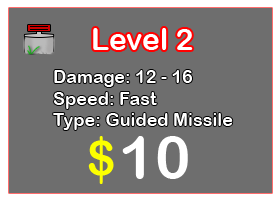
<style>
.page{position:relative;width:280px;height:200px;background:#6e6e6e}
.page>*{position:absolute;margin:0}
.t1{font:30px "ArialRoundedMTBold";color:#ffffff}
.t2{font:18px "ArialRoundedMTBold";color:#ffffff}
.t3{font:48px "ArialRoundedMTBold";color:#fcff00}
.t4{font:60px "ArialRoundedMTBold";color:#ffffff}
</style>
<div class="page">
<p class="t1" style="left:93px;top:28px;width:100px;height:22px">Level 2</p>
<p class="t2" style="left:53px;top:70px;width:180px;height:60px">Damage: 12 - 16<br>Speed: Fast<br>Type: Guided Missile</p>
<p class="t3" style="left:88px;top:136px;width:26px;height:48px">$</p>
<p class="t4" style="left:122px;top:136px;width:66px;height:43px">10</p>
</div>
